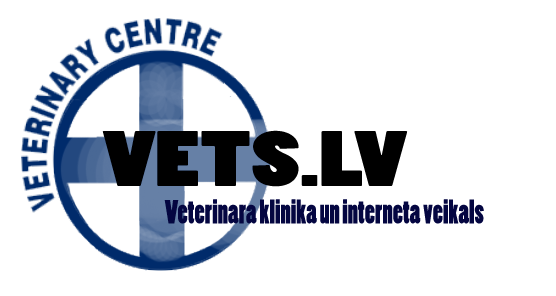
<style>
.page{position:relative;width:556px;height:296px;background:#ffffff}
.page>*{position:absolute;margin:0}
.t1{font:73.1px "PoplarStd";color:#000000;scale:1.45 1}
.t2{font:31.3px "PoplarStd";color:#040641;scale:0.87 1}
</style>
<div class="page">
<p class="t1" style="left:102px;top:130px;width:306px;height:57px">VETS.LV</p>
<p class="t2" style="left:164px;top:199px;width:320px;height:25px">Veterinara klinika un interneta veikals</p>
</div>
